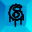
<style>
.page{position:relative;width:32px;height:32px}
.page>*{position:absolute;margin:0}
.t1{font:24px "PlasmaDripEmptyBRK";color:#020105;font-weight:bold}
</style>
<div class="page">
<p class="t1" style="left:8px;top:3px;width:16px;height:24px">6</p>
</div>
